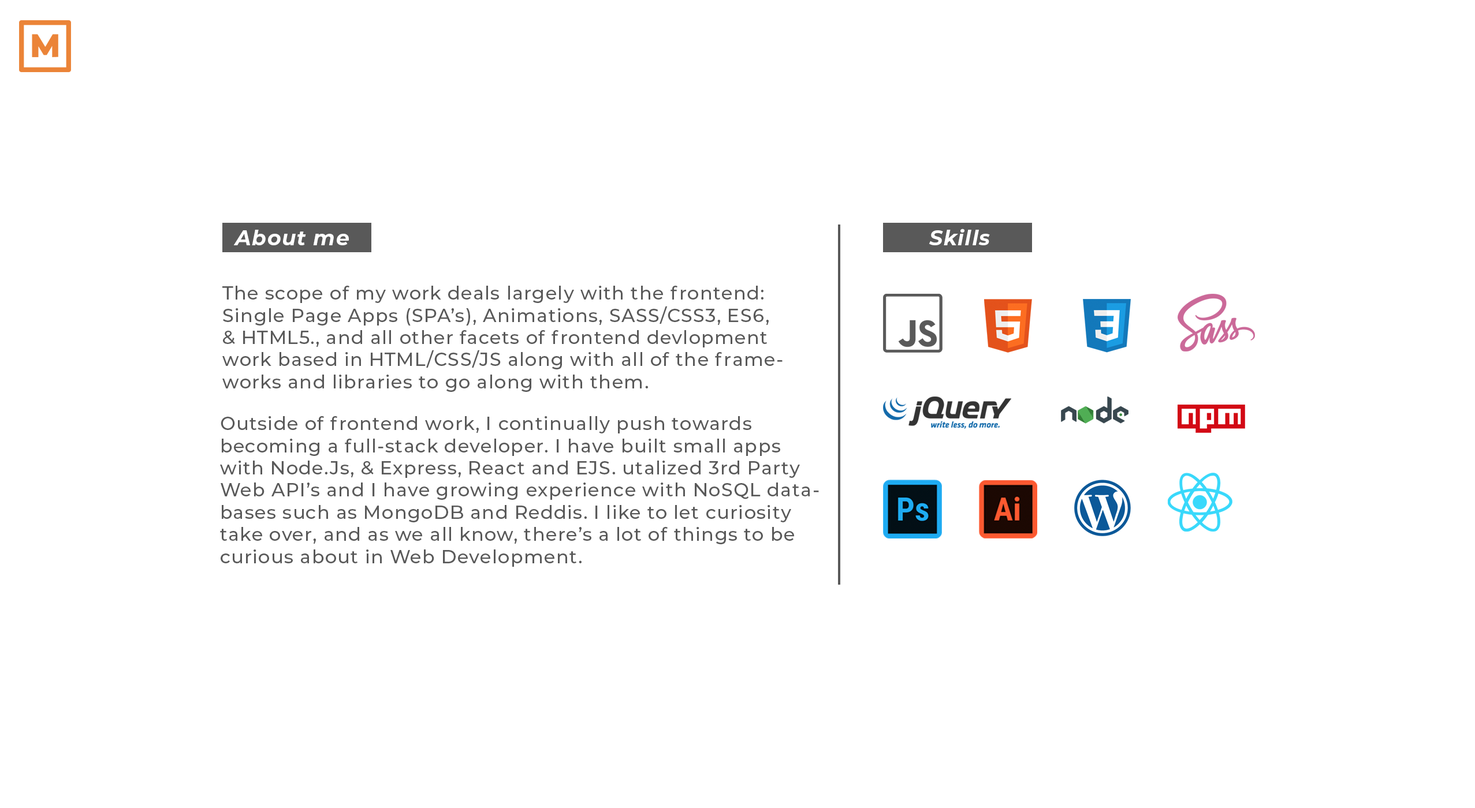
<style>
.page{position:relative;width:1475px;height:808px;background:#ffffff}
.page>*{position:absolute;margin:0}
.t1{font:20.8px "Montserrat-BoldItalic";letter-spacing:0.04em;color:#ffffff}
.t2{font:18.5px "Montserrat-Medium";letter-spacing:0.04em;color:#595959}
</style>
<div class="page">
<p class="t1" style="left:233px;top:230px;width:116px;height:15px">About me</p>
<p class="t1" style="left:929px;top:229px;width:61px;height:16px">Skills</p>
<p class="t2" style="left:222px;top:286px;width:560px;height:106px">The scope of my work deals largely with the frontend: <br>Single Page Apps (SPA’s), Animations, SASS/CSS3, ES6,<br>&amp; HTML5., and all other facets of frontend devlopment <br>work based in HTML/CSS/JS along with all of the frame-<br>works and libraries to go along with them.</p>
<p class="t2" style="left:220px;top:416px;width:599px;height:151px">Outside of frontend work, I continually push towards<br>becoming a full-stack developer. I have built small apps<br>with Node.Js, &amp; Express, React and EJS. utalized 3rd Party<br>Web API’s and I have growing experience with NoSQL data-<br>bases such as MongoDB and Reddis. I like to let curiosity <br>take over, and as we all know, there’s a lot of things to be<br>curious about in Web Development.</p>
</div>
